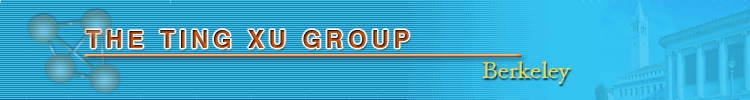
<style>
.page{position:relative;width:750px;height:100px;background:#35c3f2}
.page>*{position:absolute;margin:0}
.t1{font:24px "Helvetica-Bold";letter-spacing:0.2em}
.t2{font:24px "HoeflerText-Regular";color:#f3d756}
</style>
<div class="page">
<p class="t1" style="left:86px;top:30px;width:323px;height:18px">THE TING XU GROUP</p>
<p class="t2" style="left:482px;top:61px;width:89px;height:23px">Berkeley</p>
</div>
